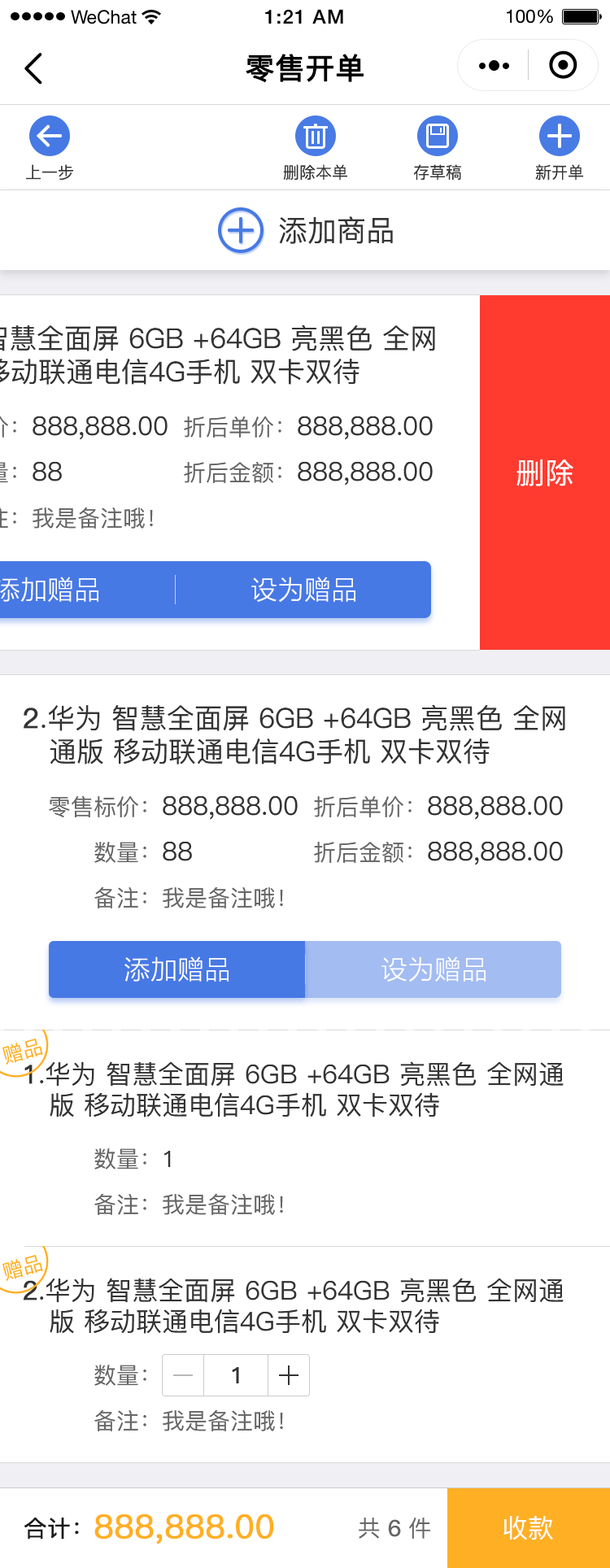
<style>
.page{position:relative;width:610px;height:1568px;background:#ffffff}
.page>*{position:absolute;margin:0}
.t1{font:29.3px "PingFang-SC-Medium";color:#000000;font-weight:bold}
.t2{font:16.3px "PingFang-SC-Medium";color:#333333}
.t3{font:29.3px "PingFang-SC-Medium";color:#333333}
.t4{font:26px "PingFang-SC-Medium";color:#333333}
.t5{font:22.8px "PingFang-SC-Medium";color:#666666}
.t6{font:29.3px "PingFang-SC-Medium";color:#ffffff}
.t7{font:26px "STHeitiSC-Medium";color:#ffffff}
.t8{font:27.7px "PingFang-SC-Medium";color:#333333}
.t9{font:27.7px "PingFang-SC-Medium";color:#333333;font-weight:bold}
.t10{font:26px "PingFang-SC-Medium";color:#333333;font-weight:bold}
.t11{font:22.8px "PingFang-SC-Medium";color:#333333}
.t12{font:22.8px "PingFang-SC-Bold";color:#333333}
.t13{font:22.8px "PingFang-SC-Medium";color:#1a1a1a;font-weight:bold}
.t14{font:32.5px "PingFang-SC-Medium";color:#ffaf23;font-weight:bold}
.t15{font:22.8px "PingFang-SC-Bold";color:#666666}
.t16{font:26px "PingFang-SC-Medium";color:#ffffff}
</style>
<div class="page">
<p class="t1" style="left:246px;top:54px;width:118px;height:29px">零售开单</p>
<p class="t2" style="left:26px;top:164px;width:47px;height:17px">上一步</p>
<p class="t2" style="left:283px;top:164px;width:64px;height:17px">删除本单</p>
<p class="t2" style="left:413px;top:164px;width:48px;height:17px">存草稿</p>
<p class="t2" style="left:535px;top:164px;width:48px;height:17px">新开单</p>
<p class="t3" style="left:279px;top:216px;width:114px;height:28px">添加商品</p>
<p class="t4" style="left:184px;top:416px;width:249px;height:24px"><span class="t5">折后单价：</span>888,888.00</p>
<p class="t4" style="left:184px;top:461px;width:249px;height:25px"><span class="t5">折后金额：</span>888,888.00</p>
<p class="t6" style="left:516px;top:459px;width:57px;height:27px">删除</p>
<p class="t7" style="left:251px;top:577px;width:104px;height:25px">设为赠品</p>
<p class="t8" style="left:24px;top:705px;width:541px;height:59px"><span class="t9">2</span>.华为 智慧全面屏 6GB +64GB 亮黑色 全网<br>   通版 移动联通电信4G手机 双卡双待</p>
<p class="t4" style="left:49px;top:795px;width:249px;height:25px"><span class="t5">零售标价：</span>888,888.00</p>
<p class="t4" style="left:314px;top:795px;width:249px;height:25px"><span class="t5">折后单价：</span>888,888.00</p>
<p class="t5" style="left:94px;top:841px;width:98px;height:22px">数量：<span class="t4">88</span></p>
<p class="t4" style="left:314px;top:841px;width:249px;height:24px"><span class="t5">折后金额：</span>888,888.00</p>
<p class="t5" style="left:94px;top:886px;width:189px;height:22px">备注：我是备注哦！</p>
<p class="t7" style="left:124px;top:956px;width:105px;height:26px">添加赠品</p>
<p class="t7" style="left:381px;top:956px;width:105px;height:26px">设为赠品</p>
<p class="t4" style="left:24px;top:1061px;width:540px;height:56px"><span class="t10">1</span>.华为 智慧全面屏 6GB +64GB 亮黑色 全网通<br>   版 移动联通电信4G手机 双卡双待</p>
<p class="t5" style="left:94px;top:1148px;width:77px;height:21px">数量：<span class="t11">1</span></p>
<p class="t5" style="left:94px;top:1193px;width:189px;height:22px">备注：我是备注哦！</p>
<p class="t4" style="left:24px;top:1278px;width:540px;height:56px"><span class="t10">2</span>.华为 智慧全面屏 6GB +64GB 亮黑色 全网通<br>   版 移动联通电信4G手机 双卡双待</p>
<p class="t5" style="left:94px;top:1365px;width:52px;height:21px">数量：</p>
<p class="t12" style="left:232px;top:1367px;width:7px;height:16px">1</p>
<p class="t5" style="left:94px;top:1409px;width:189px;height:22px">备注：我是备注哦！</p>
<p class="t13" style="left:24px;top:1518px;width:55px;height:22px">合计：</p>
<p class="t14" style="left:94px;top:1514px;width:180px;height:30px">888,888.00</p>
<p class="t5" style="left:359px;top:1518px;width:71px;height:21px">共 <span class="t15">6</span> 件</p>
<p class="t16" style="left:503px;top:1515px;width:50px;height:25px">收款</p>
</div>
